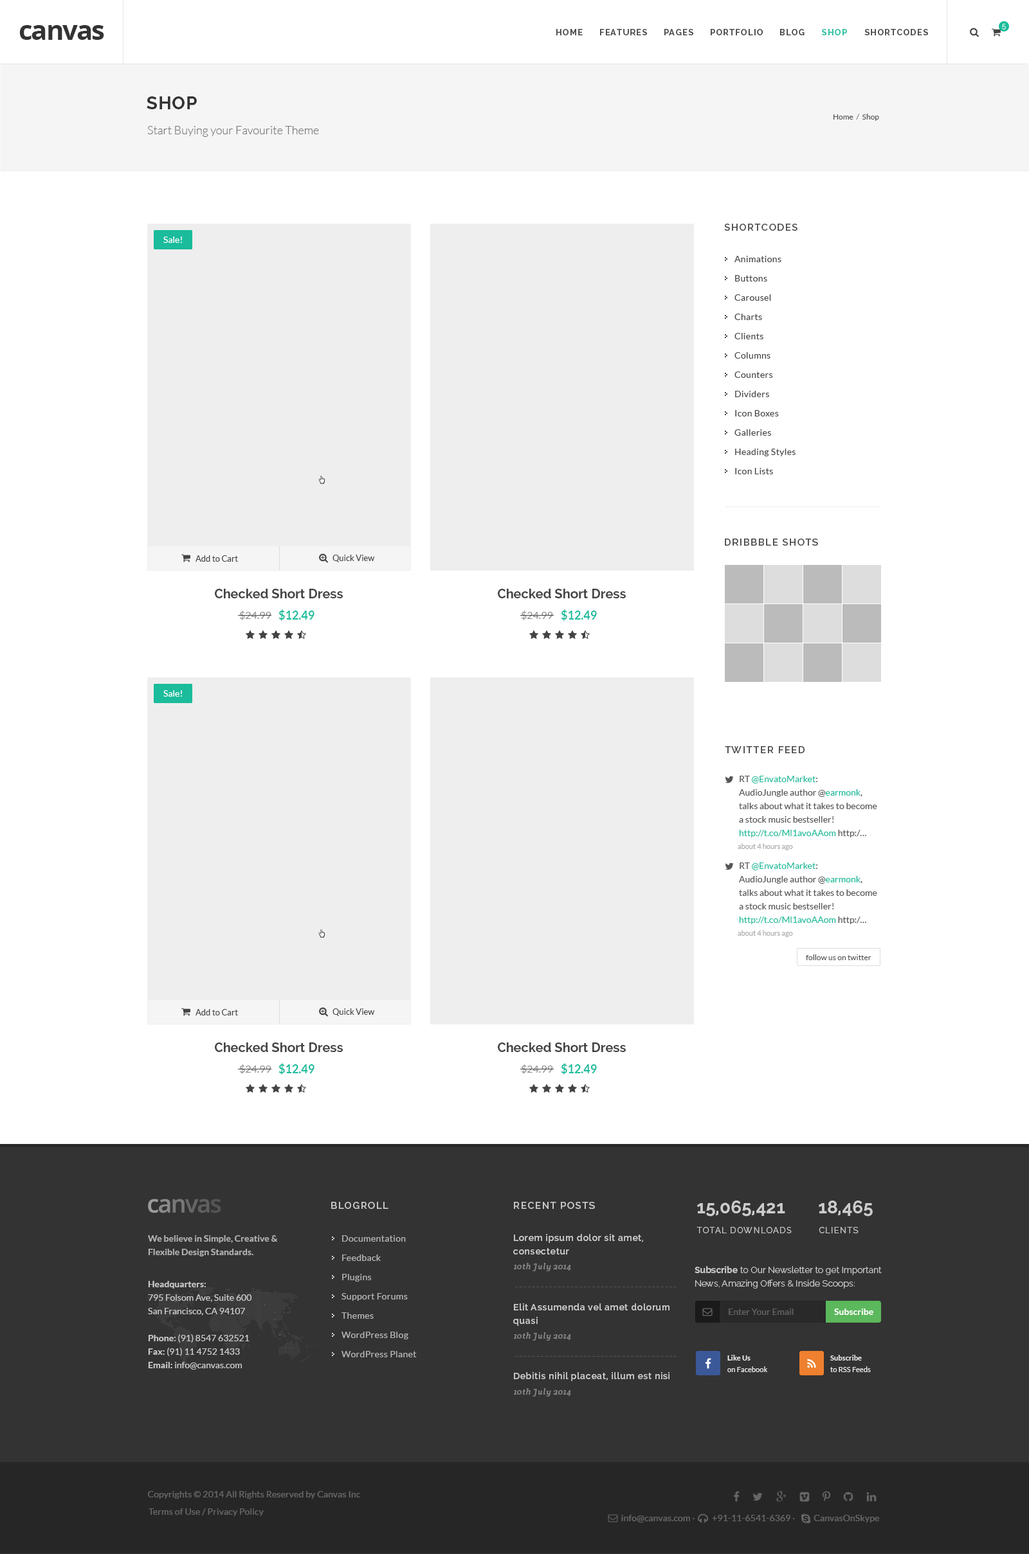
<style>
.page{position:relative;width:1029px;height:1554px;background:#ffffff}
.page>*{position:absolute;margin:0}
.t1{font:27px "OpenSans-Bold";letter-spacing:-0.05em;color:#333333}
.t2{font:8.4px "Raleway-Bold";letter-spacing:0.1em;color:#444444}
.t3{font:8.4px "Raleway-Bold";letter-spacing:0.1em;color:#1abc9c}
.t4{font:7.1px "Raleway-Light";letter-spacing:0.1em;color:#ffffff}
.t5{font:18px "Raleway-Bold";letter-spacing:0.025em;color:#333333;text-transform:uppercase}
.t6{font:7.7px "Lato-Regular";color:#555555}
.t7{font:7.7px "Lato-Regular";color:#777777}
.t8{font:11.6px "Lato-Light";color:#777777}
.t9{font:9.6px "Raleway-SemiBold";letter-spacing:0.1em;color:#444444}
.t10{font:9px "Lato-Regular";color:#ffffff}
.t11{font:9px/19.3px "Lato-Regular";letter-spacing:0.025em;color:#444444}
.t12{font:9.6px "Raleway-SemiBold";letter-spacing:0.1em;color:#444444;text-transform:uppercase}
.t13{font:8.4px "Lato-Regular";color:#444444}
.t14{font:12.9px "Raleway-Bold";color:#444444}
.t15{font:10.3px "Lato-Regular";color:#888888}
.t16{font:11.6px "Lato-Bold";color:#1abc9c}
.t17{font:9px/13.5px "Lato-Regular";color:#555555}
.t18{font:9px/13.5px "Lato-Regular";color:#1abc9c}
.t19{font:7.1px "Lato-Regular";color:#aaaaaa}
.t20{font:9.6px "Raleway-SemiBold";letter-spacing:0.1em;color:#cccccc}
.t21{font:18px "Raleway-Bold";color:#cccccc}
.t22{font:8.4px "Raleway-Regular";letter-spacing:0.1em;color:#cacaca;text-transform:uppercase}
.t23{font:9px/13.5px "Lato-Bold";color:#cccccc}
.t24{font:9px/19.3px "Lato-Regular";letter-spacing:0.025em;color:#cccccc}
.t25{font:9px/13.5px "Raleway-SemiBold";letter-spacing:0.05em;color:#cccccc}
.t26{font:8.4px "CreteRound-Italic";letter-spacing:0.05em;color:#888888}
.t27{font:9px/13.5px "Raleway-Light";color:#cccccc}
.t28{font:9px/13.5px "Raleway-Bold";color:#cccccc}
.t29{font:9px/13.5px "Lato-Regular";color:#cccccc}
.t30{font:11.6px "Lato-Italic";letter-spacing:0.05em;color:#545454}
.t31{font:9px "Lato-Regular";color:#777777}
.t32{font:9px "Lato-Bold";color:#ffffff}
.t33{font:7.1px/11.6px "Lato-Regular";letter-spacing:0.01em;color:#eeeeee}
.t34{font:7.1px/11.6px "Lato-Bold";letter-spacing:0.01em;color:#eeeeee}
.t35{font:9px "Raleway-SemiBold";letter-spacing:0.05em;color:#cccccc}
.t36{font:9px "Lato-Regular";letter-spacing:0.01em;color:#666666}
</style>
<div class="page">
<p class="t1" style="left:19px;top:25px;width:85px;height:15px">canvas</p>
<p class="t2" style="left:556px;top:29px;width:26px;height:6px">HOME</p>
<p class="t2" style="left:600px;top:29px;width:47px;height:6px">FEATURES</p>
<p class="t2" style="left:664px;top:29px;width:29px;height:6px">PAGES</p>
<p class="t2" style="left:710px;top:29px;width:52px;height:6px">PORTFOLIO</p>
<p class="t2" style="left:780px;top:29px;width:24px;height:6px">BLOG</p>
<p class="t3" style="left:822px;top:29px;width:25px;height:6px">SHOP</p>
<p class="t2" style="left:864px;top:29px;width:64px;height:6px">SHORTCODES</p>
<p class="t4" style="left:1002px;top:24px;width:3px;height:6px">5</p>
<p class="t5" style="left:147px;top:96px;width:50px;height:13px">Shop</p>
<p class="t6" style="left:833px;top:114px;width:46px;height:7px">Home  <span class="t7">/ </span> Shop</p>
<p class="t8" style="left:147px;top:126px;width:172px;height:11px">Start Buying your Favourite Theme</p>
<p class="t9" style="left:724px;top:224px;width:73px;height:7px">SHORTCODES</p>
<p class="t10" style="left:163px;top:237px;width:19px;height:6px">Sale!</p>
<p class="t11" style="left:734px;top:256px;width:61px;height:218px">Animations<br>Buttons<br>Carousel<br>Charts<br>Clients<br>Columns<br>Counters<br>Dividers<br>Icon Boxes<br>Galleries<br>Heading Styles<br>Icon Lists</p>
<p class="t12" style="left:724px;top:539px;width:94px;height:7px">Dribbble Shots</p>
<p class="t13" style="left:195px;top:555px;width:43px;height:7px">Add to Cart</p>
<p class="t13" style="left:332px;top:555px;width:43px;height:7px">Quick View</p>
<p class="t14" style="left:215px;top:589px;width:128px;height:9px">Checked Short Dress</p>
<p class="t14" style="left:498px;top:589px;width:128px;height:9px">Checked Short Dress</p>
<p class="t15" style="left:240px;top:611px;width:31px;height:9px">$24.99</p>
<p class="t16" style="left:278px;top:609px;width:36px;height:12px">$12.49</p>
<p class="t15" style="left:521px;top:611px;width:32px;height:9px">$24.99</p>
<p class="t16" style="left:561px;top:609px;width:36px;height:12px">$12.49</p>
<p class="t10" style="left:163px;top:690px;width:19px;height:7px">Sale!</p>
<p class="t12" style="left:724px;top:746px;width:80px;height:7px">Twitter feed</p>
<p class="t17" style="left:739px;top:776px;width:138px;height:62px">RT <span class="t18">@EnvatoMarket</span>:<br>AudioJungle author @<span class="t18">earmonk</span>,<br>talks about what it takes to become<br>a stock music bestseller!<br><span class="t18">http://t.co/Ml1avoAAom </span>http:/…</p>
<p class="t19" style="left:737px;top:843px;width:56px;height:8px">about 4 hours ago</p>
<p class="t17" style="left:739px;top:863px;width:138px;height:61px">RT <span class="t18">@EnvatoMarket</span>:<br>AudioJungle author @<span class="t18">earmonk</span>,<br>talks about what it takes to become<br>a stock music bestseller!<br><span class="t18">http://t.co/Ml1avoAAom </span>http:/…</p>
<p class="t19" style="left:737px;top:930px;width:56px;height:7px">about 4 hours ago</p>
<p class="t6" style="left:806px;top:955px;width:65px;height:5px">follow us on twitter</p>
<p class="t13" style="left:195px;top:1009px;width:43px;height:7px">Add to Cart</p>
<p class="t13" style="left:332px;top:1009px;width:43px;height:7px">Quick View</p>
<p class="t14" style="left:215px;top:1043px;width:128px;height:9px">Checked Short Dress</p>
<p class="t14" style="left:498px;top:1043px;width:128px;height:9px">Checked Short Dress</p>
<p class="t15" style="left:240px;top:1065px;width:31px;height:9px">$24.99</p>
<p class="t16" style="left:278px;top:1063px;width:36px;height:12px">$12.49</p>
<p class="t15" style="left:521px;top:1065px;width:32px;height:9px">$24.99</p>
<p class="t16" style="left:561px;top:1063px;width:36px;height:12px">$12.49</p>
<p class="t20" style="left:331px;top:1202px;width:57px;height:7px">BLOGROLL</p>
<p class="t20" style="left:514px;top:1202px;width:81px;height:7px">RECENT POSTS</p>
<p class="t21" style="left:697px;top:1201px;width:88px;height:16px">15,065,421</p>
<p class="t21" style="left:818px;top:1201px;width:54px;height:16px">18,465</p>
<p class="t22" style="left:696px;top:1227px;width:95px;height:7px">TOTAL Downloads</p>
<p class="t22" style="left:818px;top:1227px;width:40px;height:7px">CLIENTS</p>
<p class="t23" style="left:148px;top:1236px;width:130px;height:21px;opacity:0.8">We believe in Simple, Creative &amp;<br>Flexible Design Standards.</p>
<p class="t24" style="left:341px;top:1236px;width:76px;height:122px;opacity:0.8">Documentation<br>Feedback<br>Plugins<br>Support Forums<br>Themes<br>WordPress Blog<br>WordPress Planet</p>
<p class="t25" style="left:513px;top:1234px;width:130px;height:21px">Lorem ipsum dolor sit amet,<br>consectetur</p>
<p class="t26" style="left:513px;top:1263px;width:58px;height:9px">10th July 2014</p>
<p class="t27" style="left:694px;top:1266px;width:187px;height:23px"><span class="t28">Subscribe</span> to Our Newsletter to get Important<br>News, Amazing Offers &amp; Inside Scoops:</p>
<p class="t29" style="left:148px;top:1281px;width:104px;height:89px"><span class="t23">Headquarters:<br></span>795 Folsom Ave, Suite 600<br>San Francisco, CA 94107<br><span class="t23"><br>Phone: </span>(91) 8547 632521<br><span class="t23">Fax: </span>(91) 11 4752 1433<br><span class="t23">Email: </span>info@canvas.com</p>
<p class="t30" style="left:514px;top:1287px;width:162px;height:1px">--------------------------------------</p>
<p class="t25" style="left:513px;top:1304px;width:156px;height:22px">Elit Assumenda vel amet dolorum<br>quasi</p>
<p class="t31" style="left:728px;top:1309px;width:65px;height:6px;opacity:0.7">Enter Your Email</p>
<p class="t32" style="left:834px;top:1309px;width:39px;height:6px">Subscribe</p>
<p class="t26" style="left:513px;top:1333px;width:58px;height:8px">10th July 2014</p>
<p class="t30" style="left:514px;top:1356px;width:162px;height:1px">--------------------------------------</p>
<p class="t33" style="left:727px;top:1355px;width:40px;height:17px"><span class="t34">Like Us<br></span>on Facebook</p>
<p class="t33" style="left:830px;top:1355px;width:40px;height:17px"><span class="t34">Subscribe<br></span>to RSS Feeds</p>
<p class="t35" style="left:514px;top:1372px;width:155px;height:10px">Debitis nihil placeat, illum est nisi</p>
<p class="t26" style="left:513px;top:1389px;width:58px;height:8px">10th July 2014</p>
<p class="t36" style="left:148px;top:1491px;width:212px;height:8px">Copyrights © 2014 All Rights Reserved by Canvas Inc</p>
<p class="t36" style="left:148px;top:1509px;width:116px;height:7px">Terms of Use / Privacy Policy</p>
<p class="t36" style="left:621px;top:1515px;width:258px;height:8px">info@canvas.com ·   +91-11-6541-6369 ·        CanvasOnSkype</p>
</div>
